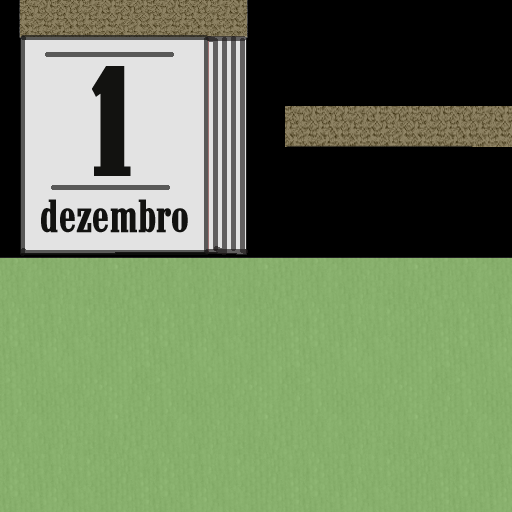
<style>
.page{position:relative;width:512px;height:512px;background:#000000}
.page>*{position:absolute;margin:0}
.t1{font:161px "Marlboro";color:#121210;scale:1.09 1}
.t2{font:47.3px "Marlboro";color:#121210}
</style>
<div class="page">
<p class="t1" style="left:92px;top:66px;width:39px;height:110px">1</p>
<p class="t2" style="left:41px;top:199px;width:147px;height:34px">dezembro</p>
</div>
